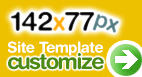
<style>
.page{position:relative;width:142px;height:77px;background:#eec100}
.page>*{position:absolute;margin:0}
.t1{font:26.9px "HelveticaRounded-Bold";letter-spacing:-0.025em}
.t2{font:23.2px "HelveticaRounded-Bold";letter-spacing:-0.025em;color:#64898f}
.t3{font:14.8px "HelveticaRounded-Bold";letter-spacing:-0.025em;color:#ffffff}
.t4{font:21.9px "HelveticaRounded-Bold";letter-spacing:-0.075em;color:#4c8a10}
</style>
<div class="page">
<p class="t1" style="left:11px;top:11px;width:84px;height:20px">142x77</p>
<p class="t2" style="left:92px;top:14px;width:27px;height:19px;rotate:19deg">px</p>
<p class="t3" style="left:8px;top:41px;width:95px;height:15px">Site Template</p>
<p class="t4" style="left:8px;top:53px;width:96px;height:17px">customize</p>
<p class="t4" style="left:8px;top:53px;width:96px;height:17px">customize</p>
<p class="t4" style="left:8px;top:53px;width:96px;height:17px">customize</p>
</div>
